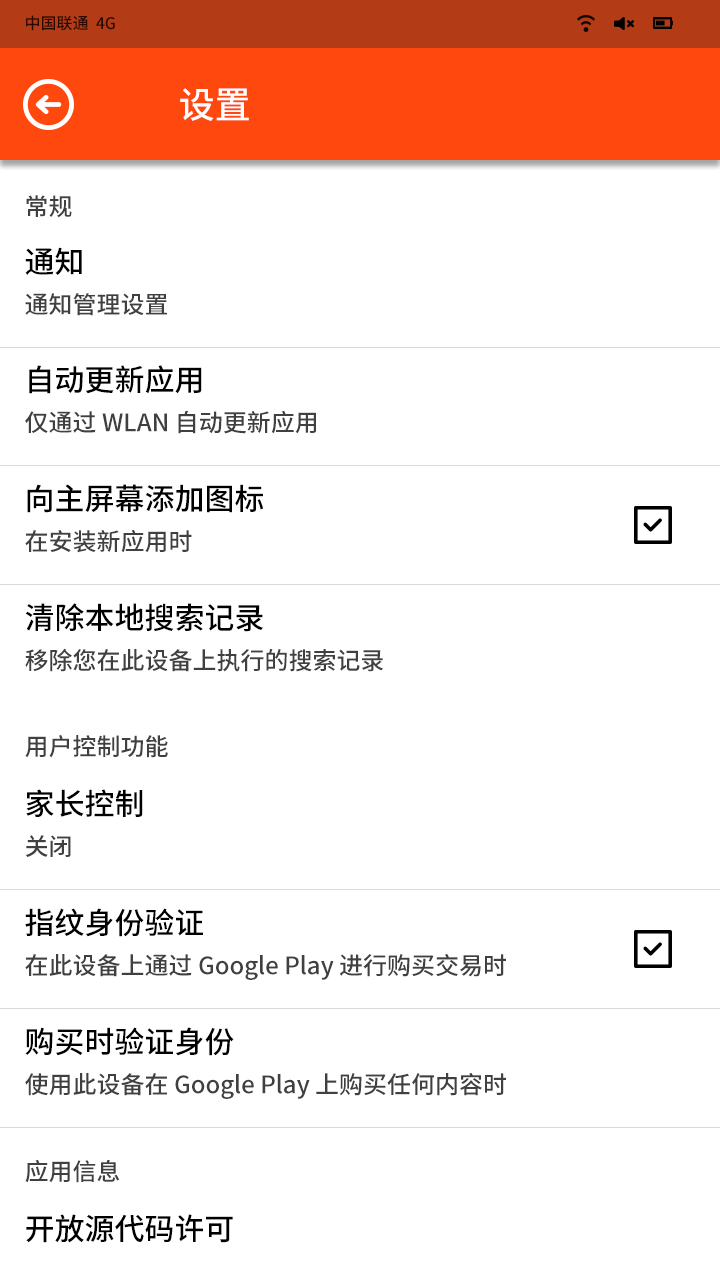
<style>
.page{position:relative;width:720px;height:1280px;background:#ffffff}
.page>*{position:absolute;margin:0}
.t1{font:16px "SourceHanSansCN-Medium";color:#2a0802}
.t2{font:36px "SourceHanSansCN-Medium";color:#ffffff}
.t3{font:24px "SourceHanSansCN-Medium";color:#404040}
.t4{font:30px "SourceHanSansCN-Medium";color:#000000}
</style>
<div class="page">
<p class="t1" style="left:26px;top:15px;width:89px;height:16px">中国联通  4G</p>
<p class="t2" style="left:180px;top:88px;width:69px;height:33px">设置</p>
<p class="t3" style="left:26px;top:195px;width:46px;height:23px">常规</p>
<p class="t4" style="left:25px;top:247px;width:57px;height:28px">通知</p>
<p class="t3" style="left:25px;top:293px;width:142px;height:23px">通知管理设置</p>
<p class="t4" style="left:29px;top:365px;width:173px;height:29px">自动更新应用</p>
<p class="t3" style="left:25px;top:410px;width:291px;height:24px">仅通过 WLAN 自动更新应用</p>
<p class="t4" style="left:27px;top:484px;width:237px;height:29px">向主屏幕添加图标</p>
<p class="t3" style="left:25px;top:529px;width:167px;height:24px">在安装新应用时</p>
<p class="t4" style="left:25px;top:603px;width:238px;height:29px">清除本地搜索记录</p>
<p class="t3" style="left:25px;top:648px;width:359px;height:24px">移除您在此设备上执行的搜索记录</p>
<p class="t3" style="left:25px;top:735px;width:143px;height:23px">用户控制功能</p>
<p class="t4" style="left:26px;top:789px;width:117px;height:28px">家长控制</p>
<p class="t3" style="left:25px;top:835px;width:46px;height:22px">关闭</p>
<p class="t4" style="left:25px;top:908px;width:178px;height:29px">指纹身份验证</p>
<p class="t3" style="left:25px;top:953px;width:481px;height:27px">在此设备上通过 Google Play 进行购买交易时</p>
<p class="t4" style="left:25px;top:1027px;width:209px;height:29px">购买时验证身份</p>
<p class="t3" style="left:25px;top:1073px;width:481px;height:26px">使用此设备在 Google Play 上购买任何内容时</p>
<p class="t3" style="left:25px;top:1159px;width:95px;height:24px">应用信息</p>
<p class="t4" style="left:26px;top:1214px;width:207px;height:29px">开放源代码许可</p>
</div>
